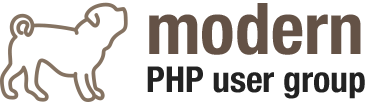
<style>
.page{position:relative;width:366px;height:102px;background:#ffffff}
.page>*{position:absolute;margin:0}
.t1{font:71.5px "HelveticaNeue-CondensedBold";color:#645246}
.t2{font:35.7px "HelveticaNeue-CondensedBold";color:#222222}
</style>
<div class="page">
<p class="t1" style="left:149px;top:3px;width:212px;height:52px">modern</p>
<p class="t2" style="left:147px;top:66px;width:218px;height:33px">PHP user group</p>
</div>
